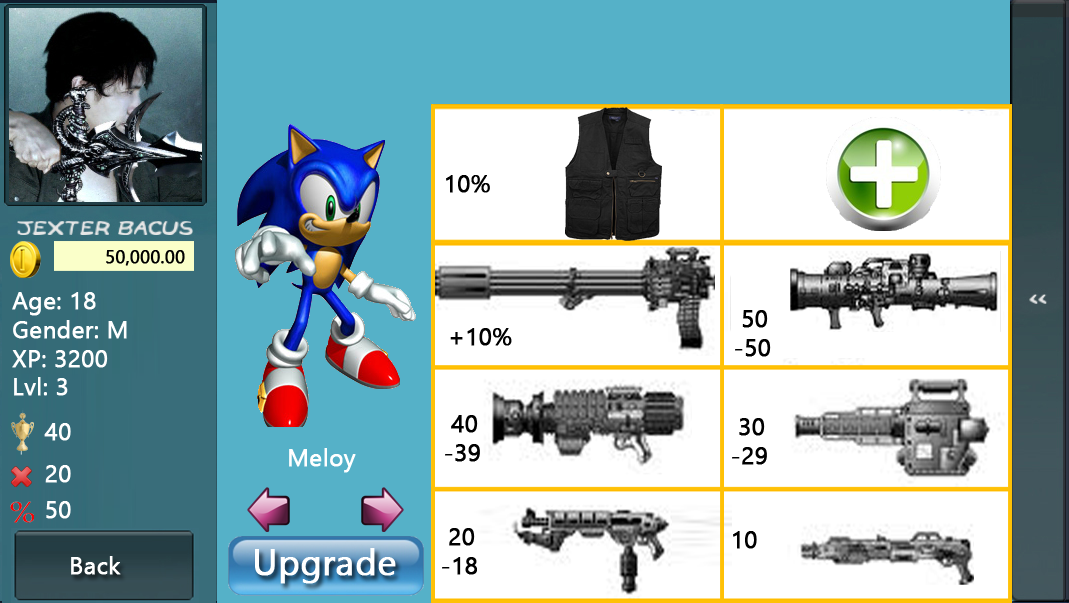
<style>
.page{position:relative;width:1069px;height:603px;background:#ffffff}
.page>*{position:absolute;margin:0}
.t1{font:24px "NirmalaUI";color:#000000;font-weight:bold}
.t2{font:18px "NirmalaUI";color:#000000;font-weight:bold}
.t3{font:24px "NirmalaUI";color:#ffffff;font-weight:bold}
.t4{font:36px "NirmalaUI";color:#ffffff;font-weight:bold}
</style>
<div class="page">
<p class="t1" style="left:446px;top:175px;width:44px;height:18px">10%</p>
<p class="t2" style="left:106px;top:250px;width:79px;height:16px">50,000.00</p>
<p class="t3" style="left:12px;top:292px;width:115px;height:104px">Age: 18<br>Gender: M<br>XP: 3200<br>Lvl: 3</p>
<p class="t1" style="left:735px;top:310px;width:36px;height:47px">50<br>-50</p>
<p class="t1" style="left:450px;top:328px;width:62px;height:18px">+10%</p>
<p class="t3" style="left:44px;top:423px;width:27px;height:18px">40</p>
<p class="t1" style="left:445px;top:415px;width:35px;height:47px">40<br>-39</p>
<p class="t1" style="left:732px;top:418px;width:35px;height:47px">30<br>-29</p>
<p class="t3" style="left:289px;top:448px;width:67px;height:25px">Meloy</p>
<p class="t3" style="left:45px;top:465px;width:26px;height:18px">20</p>
<p class="t3" style="left:46px;top:501px;width:25px;height:18px">50</p>
<p class="t1" style="left:442px;top:528px;width:35px;height:47px">20<br>-18</p>
<p class="t1" style="left:733px;top:531px;width:24px;height:18px">10</p>
<p class="t3" style="left:71px;top:556px;width:50px;height:19px">Back</p>
<p class="t4" style="left:255px;top:548px;width:141px;height:36px">Upgrade</p>
</div>
